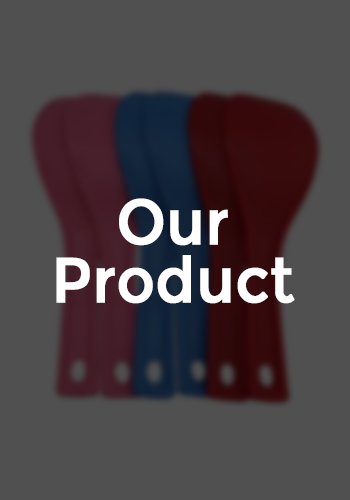
<style>
.page{position:relative;width:350px;height:500px;background:#505050}
.page>*{position:absolute;margin:0}
.t1{font:63.6px/58.5px "Montserrat-Regular";color:#ffffff;font-weight:bold;scale:0.91 1}
</style>
<div class="page">
<p class="t1" style="left:56px;top:198px;width:239px;height:106px;text-align:center">Our<br>Product</p>
</div>
